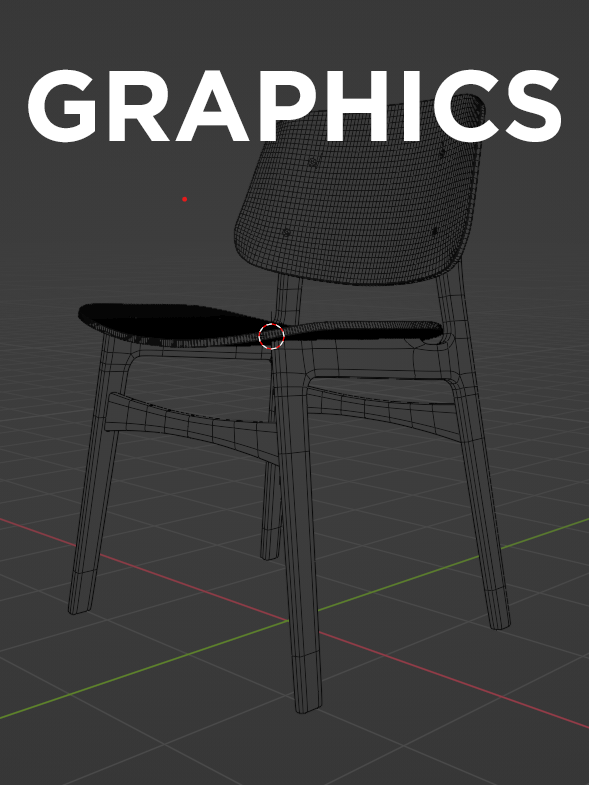
<style>
.page{position:relative;width:589px;height:785px}
.page>*{position:absolute;margin:0}
.t1{font:100px "Gotham-Bold";color:#ffffff}
</style>
<div class="page">
<p class="t1" style="left:28px;top:69px;width:533px;height:74px">GRAPHICS</p>
</div>
